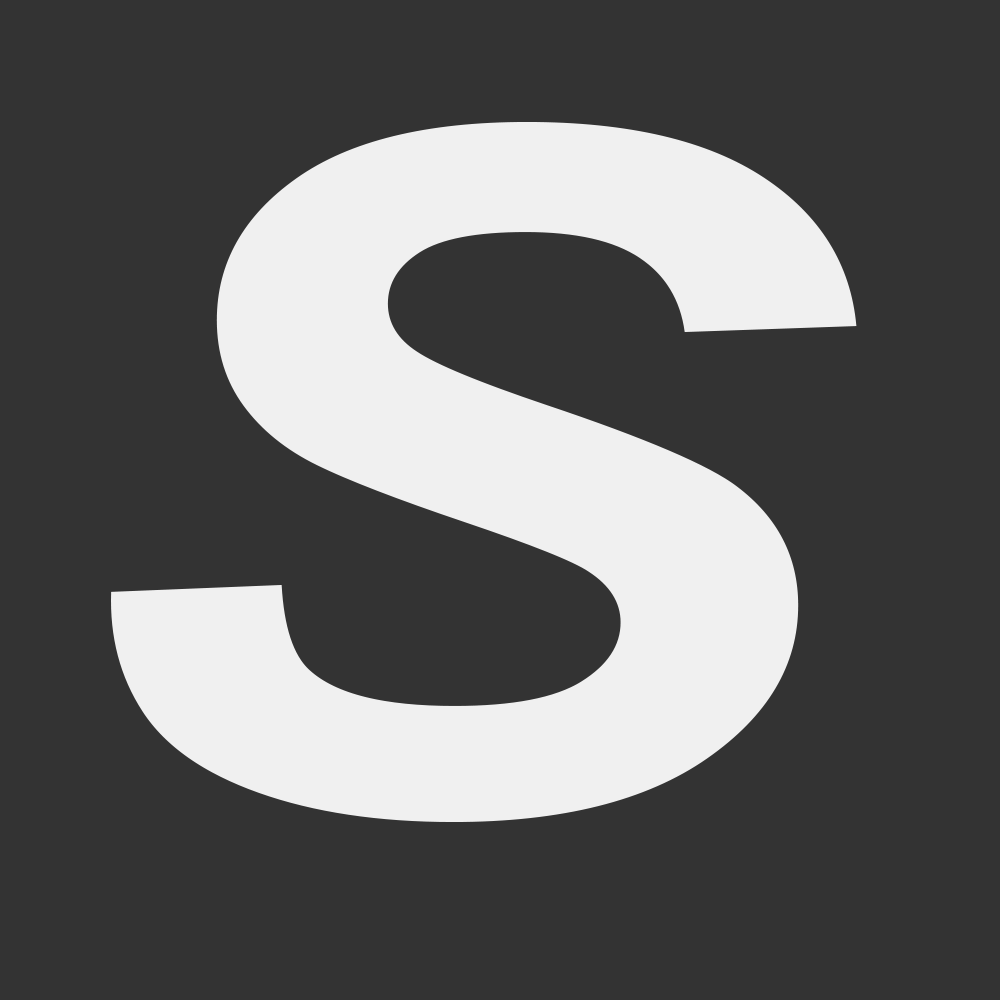
<style>
.page{position:relative;width:1000px;height:1000px;background:#333333}
.page>*{position:absolute;margin:0}
.t1{font:943.9px "Arial-BoldItalicMT";letter-spacing:0.1em;color:#f0f0f0;scale:1.29 1}
</style>
<div class="page">
<p class="t1" style="left:111px;top:122px;width:746px;height:700px">S</p>
</div>
